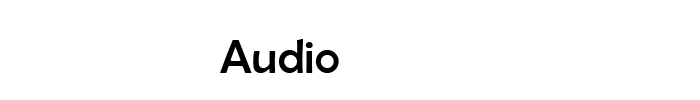
<style>
.page{position:relative;width:700px;height:100px;background:#ffffff}
.page>*{position:absolute;margin:0}
.t1{font:48px "BerlinSansFB-Reg";color:#000000}
</style>
<div class="page">
<p class="t1" style="left:220px;top:39px;width:119px;height:34px">Audio</p>
</div>
